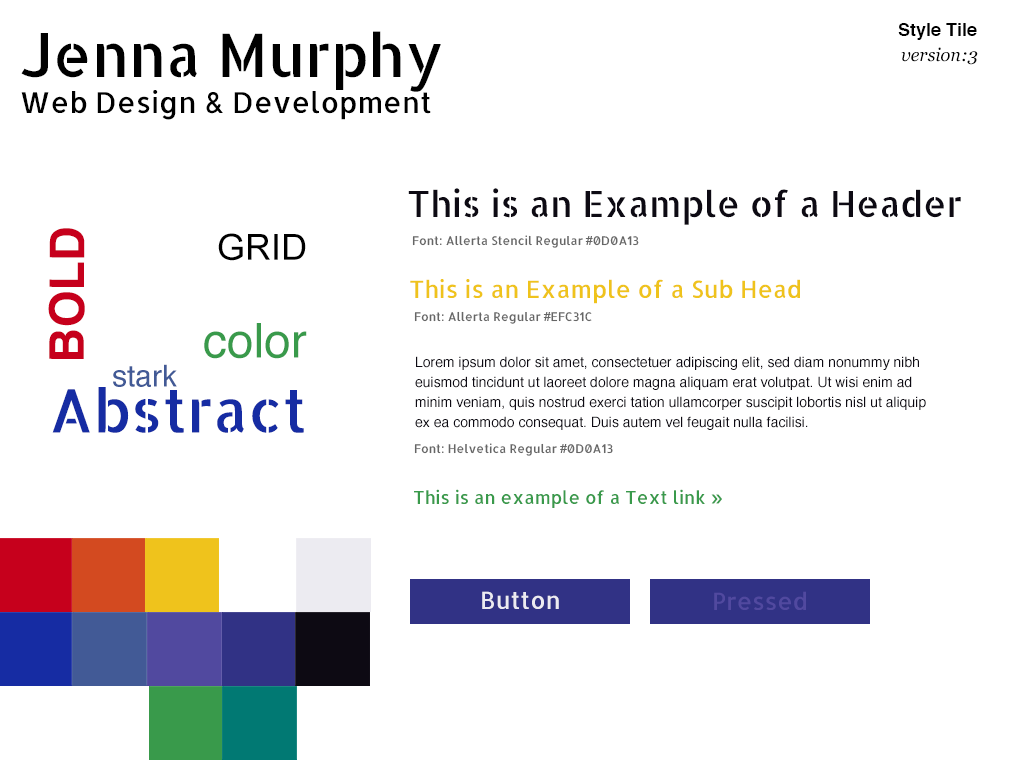
<style>
.page{position:relative;width:1020px;height:760px;background:#ffffff}
.page>*{position:absolute;margin:0}
.t1{font:18px "Helvetica-Bold";color:#000000}
.t2{font:29px/36px "Allerta-Regular";color:#000000}
.t3{font:60px/24px "AllertaStencil-Regular";color:#000000}
.t4{font:18px "Georgia-Italic";color:#000000}
.t5{font:36px "AllertaStencil-Regular";color:#0d0a13}
.t6{font:48px "Helvetica-Bold";color:#c6001c}
.t7{font:36px "ArialMT";color:#000000}
.t8{font:12px "Allerta-Regular";color:#666666}
.t9{font:12px "ArialMT";color:#666666}
.t10{font:24px "Allerta-Regular";color:#efc31c}
.t11{font:48px "Helvetica";color:#399a4b}
.t12{font:30px "Helvetica";color:#425a96}
.t13{font:14px/20px "Helvetica";color:#0d0a13}
.t14{font:60px "AllertaStencil-Regular";color:#162ca3}
.t15{font:18px "Allerta-Regular";color:#399a4b}
.t16{font:24px "Allerta-Regular";color:#ecebf1}
.t17{font:24px "Allerta-Regular";color:#51499f}
</style>
<div class="page">
<p class="t1" style="left:898px;top:23px;width:79px;height:17px">Style Tile</p>
<p class="t2" style="left:21px;top:31px;width:420px;height:89px"><span class="t3">Jenna Murphy <br></span>Web Design &amp; Development</p>
<p class="t4" style="left:901px;top:47px;width:77px;height:18px">version:3</p>
<p class="t5" style="left:408px;top:188px;width:553px;height:37px">This is an Example of a Header</p>
<p class="t6" style="left:48px;top:228px;width:37px;height:131px;rotate:-90deg">BOLD</p>
<p class="t7" style="left:218px;top:233px;width:88px;height:28px">GRID</p>
<p class="t8" style="left:412px;top:235px;width:227px;height:13px">Font: Allerta Stencil Regular <span class="t9">#</span>0D0A13</p>
<p class="t10" style="left:410px;top:279px;width:390px;height:25px">This is an Example of a Sub Head</p>
<p class="t8" style="left:414px;top:311px;width:178px;height:13px">Font: Allerta Regular <span class="t9">#</span>EFC31C</p>
<p class="t11" style="left:204px;top:323px;width:103px;height:36px">color</p>
<p class="t12" style="left:113px;top:364px;width:64px;height:23px">stark</p>
<p class="t13" style="left:415px;top:356px;width:511px;height:74px">Lorem ipsum dolor sit amet, consectetuer adipiscing elit, sed diam nonummy nibh euismod tincidunt ut laoreet dolore magna aliquam erat volutpat. Ut wisi enim ad minim veniam, quis nostrud exerci tation ullamcorper suscipit lobortis nisl ut aliquip ex ea commodo consequat. Duis autem vel feugait nulla facilisi.</p>
<p class="t14" style="left:52px;top:387px;width:252px;height:46px">Abstract</p>
<p class="t8" style="left:414px;top:443px;width:199px;height:13px">Font: Helvetica Regular <span class="t9">#</span>0D0A13</p>
<p class="t15" style="left:414px;top:489px;width:308px;height:19px">This is an example of a Text link »</p>
<p class="t16" style="left:482px;top:591px;width:77px;height:18px">Button</p>
<p class="t17" style="left:714px;top:591px;width:92px;height:19px">Pressed</p>
</div>
